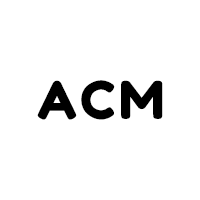
<style>
.page{position:relative;width:200px;height:200px;background:#ffffff}
.page>*{position:absolute;margin:0}
.t1{font:52.2px "FredokaOne-Regular";letter-spacing:0.06em;color:#000000}
</style>
<div class="page">
<p class="t1" style="left:37px;top:80px;width:126px;height:40px">ACM</p>
</div>
